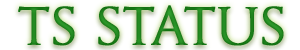
<style>
.page{position:relative;width:300px;height:50px;background:#ffffff}
.page>*{position:absolute;margin:0}
.t1{font:52.7px "GoudyTrajan-Regular";color:#1f831d;font-weight:bold}
</style>
<div class="page">
<p class="t1" style="left:18px;top:5px;width:266px;height:41px">TS Status</p>
</div>
